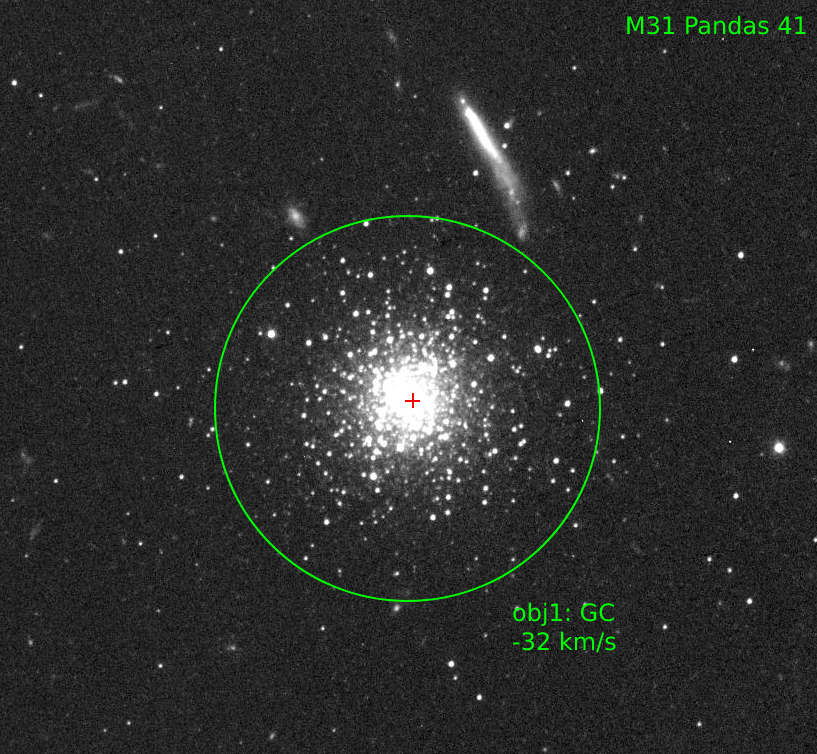
<style>
.page{position:relative;width:817px;height:754px}
.page>*{position:absolute;margin:0}
.t1{font:24px "DejaVuSans";color:#00ff00}
</style>
<div class="page">
<p class="t1" style="left:627px;top:15px;width:179px;height:20px">M31 Pandas 41</p>
<p class="t1" style="left:513px;top:602px;width:103px;height:51px">obj1: GC<br>-32 km/s</p>
</div>
